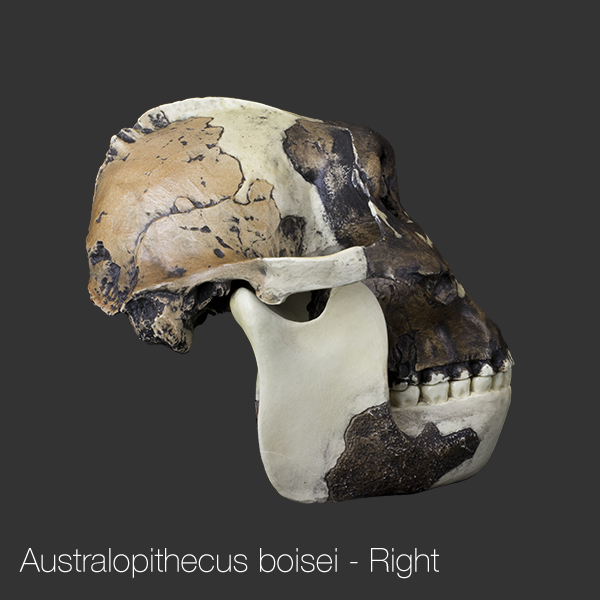
<style>
.page{position:relative;width:600px;height:600px;background:#333333}
.page>*{position:absolute;margin:0}
.t1{font:33.3px "HelveticaNeue-Thin";color:#ffffff}
</style>
<div class="page">
<p class="t1" style="left:19px;top:548px;width:420px;height:31px">Australopithecus boisei - Right</p>
</div>
